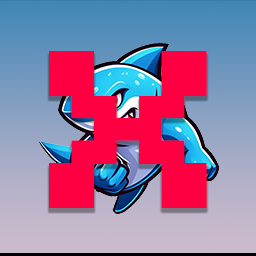
<style>
.page{position:relative;width:256px;height:256px;background:#fe0042}
.page>*{position:absolute;margin:0}
.t1{font:180.2px "PressStart2P-Regular";color:#fe0042}
</style>
<div class="page">
<p class="t1" style="left:49px;top:51px;width:158px;height:157px">X</p>
</div>
